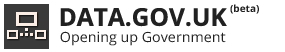
<style>
.page{position:relative;width:285px;height:52px;background:#ffffff}
.page>*{position:absolute;margin:0}
.t1{font:9.9px "OpenSans-Bold";color:#212121}
.t2{font:24.5px "OpenSans-Bold";color:#212121}
.t3{font:13.9px "OpenSans";color:#212121}
</style>
<div class="page">
<p class="t1" style="left:230px;top:4px;width:29px;height:10px">(beta)</p>
<p class="t2" style="left:60px;top:8px;width:167px;height:19px">DATA.GOV.UK</p>
<p class="t3" style="left:60px;top:31px;width:166px;height:15px">Opening up Government</p>
</div>
